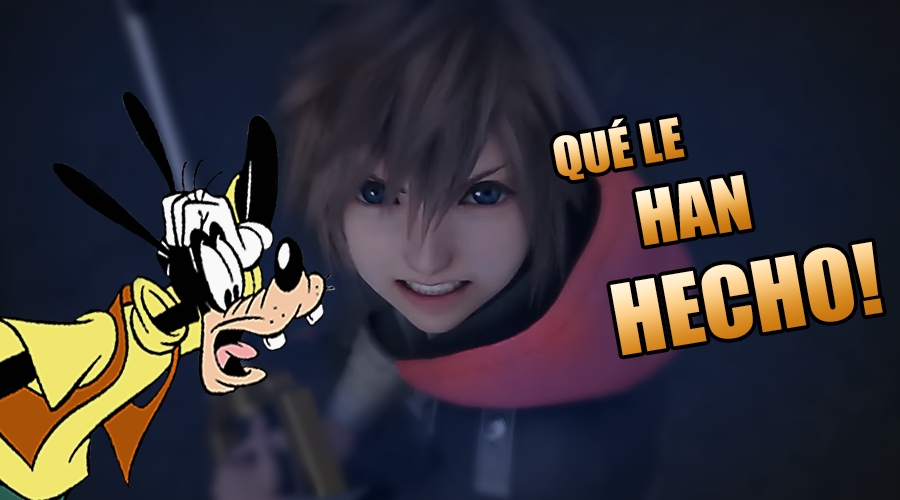
<style>
.page{position:relative;width:900px;height:500px}
.page>*{position:absolute;margin:0}
.t1{font:12.2px "Impact";scale:1.03 1}
.t2{font:16.5px "Impact"}
.t3{font:21.7px "Impact";scale:1.03 1}
</style>
<div class="page">
<p class="t1" style="left:553px;top:117px;width:132px;height:63px;rotate:-9deg">QUÉ LE</p>
<p class="t2" style="left:635px;top:174px;width:117px;height:72px;rotate:-9deg">HAN</p>
<p class="t3" style="left:610px;top:241px;width:273px;height:115px;rotate:-9deg">HECHO!</p>
</div>
